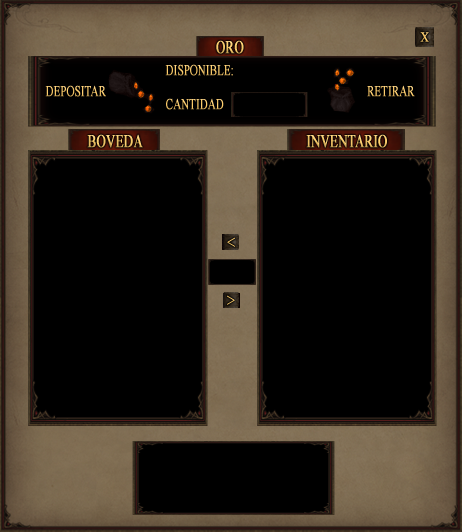
<style>
.page{position:relative;width:462px;height:532px;background:#000000}
.page>*{position:absolute;margin:0}
.t1{font:18px "TimesNewRomanPSMT";text-transform:uppercase;font-weight:bold;scale:0.71 1}
.t2{font:13.9px "TimesNewRomanPSMT";color:#f8c868;text-transform:uppercase;font-weight:bold;scale:0.8 1}
.t3{font:15px "TimesNewRomanPSMT";color:#f6c767;text-transform:uppercase;font-weight:bold;scale:0.71 1}
.t4{font:15px "TimesNewRomanPSMT";color:#fccc6a;text-transform:uppercase;font-weight:bold;scale:0.71 1}
.t5{font:15px "TimesNewRomanPSMT";text-transform:uppercase;font-weight:bold;scale:0.71 1}
.t6{font:15px "TimesNewRomanPSMT";color:#fecd6b;text-transform:uppercase;font-weight:bold;scale:0.71 1}
.t7{font:18px "TimesNewRomanPSMT";color:#f4c566;text-transform:uppercase;font-weight:bold;scale:0.71 1}
.t8{font:18px "TimesNewRomanPSMT";text-transform:uppercase;font-weight:bold;scale:0.75 1}
</style>
<div class="page">
<p class="t1" style="left:216px;top:40px;width:28px;height:14px">oro</p>
<p class="t2" style="left:420px;top:32px;width:9px;height:10px">X</p>
<p class="t3" style="left:165px;top:64px;width:68px;height:12px">Disponible:</p>
<p class="t4" style="left:45px;top:85px;width:61px;height:12px">depositar</p>
<p class="t5" style="left:367px;top:85px;width:48px;height:12px">Retirar</p>
<p class="t6" style="left:166px;top:98px;width:58px;height:12px">cantidad</p>
<p class="t1" style="left:87px;top:134px;width:56px;height:14px">Boveda</p>
<p class="t7" style="left:306px;top:134px;width:81px;height:14px">Inventario</p>
<p class="t8" style="left:227px;top:237px;width:8px;height:10px">&lt;</p>
<p class="t8" style="left:227px;top:295px;width:8px;height:10px">&gt;</p>
</div>
